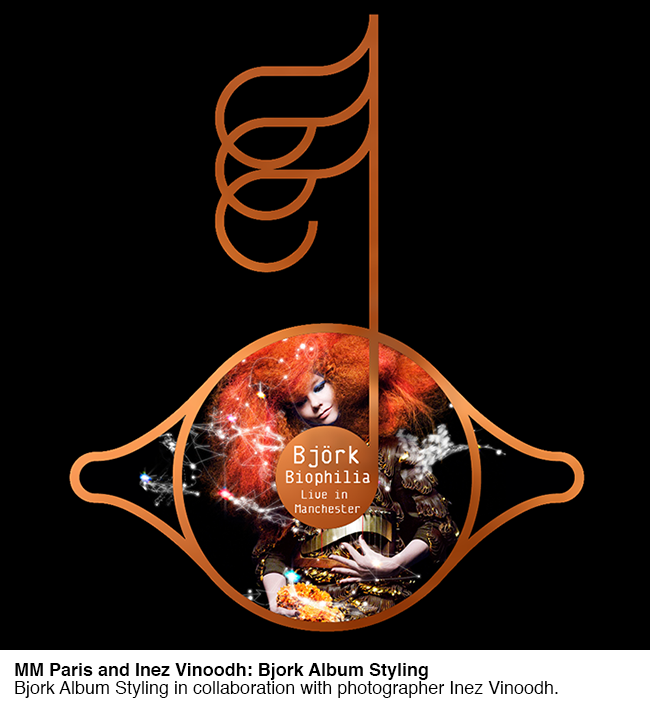
<style>
.page{position:relative;width:650px;height:720px;background:#000000}
.page>*{position:absolute;margin:0}
.t1{font:18px/18px "Helvetica";color:#000000}
.t2{font:18px/18px "Helvetica-Bold";color:#000000}
</style>
<div class="page">
<p class="t1" style="left:15px;top:663px;width:543px;height:35px"><span class="t2">MM Paris and Inez Vinoodh: Bjork Album Styling<br></span>Bjork Album Styling in collaboration with photographer Inez Vinoodh.</p>
</div>
